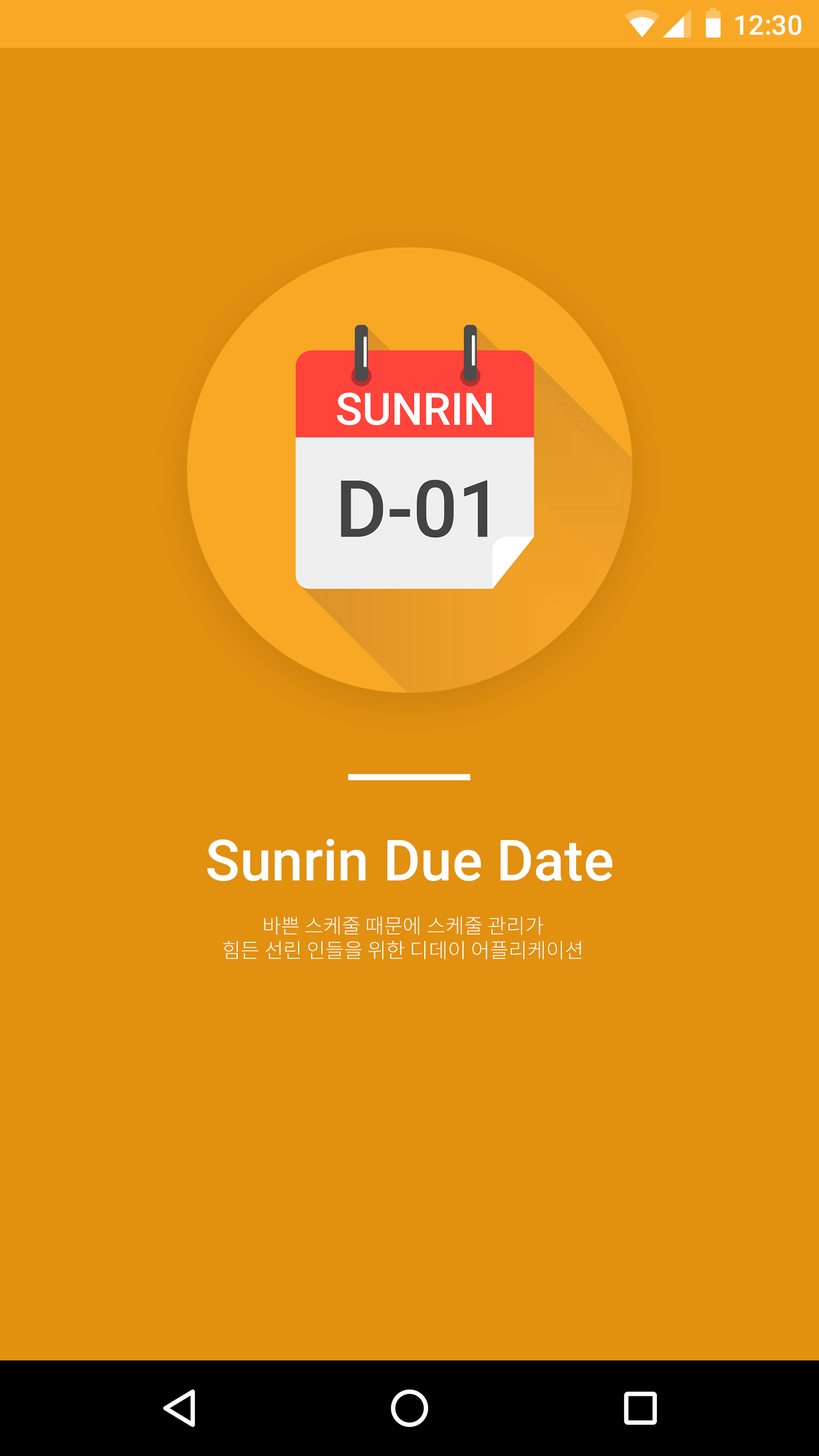
<style>
.page{position:relative;width:819px;height:1456px;background:#e19010}
.page>*{position:absolute;margin:0}
.t1{font:27.3px "Roboto-Medium";color:#ffffff}
.t2{font:56.8px "Roboto-Medium";color:#ffffff}
.t3{font:20.5px "NotoSansCJKkr-Light";color:#ffffff}
</style>
<div class="page">
<p class="t1" style="left:735px;top:15px;width:66px;height:20px">12:30</p>
<p class="t2" style="left:207px;top:839px;width:406px;height:42px">Sunrin Due Date</p>
<p class="t3" style="left:223px;top:916px;width:358px;height:43px;text-align:center">바쁜 스케줄 때문에 스케줄 관리가<br>힘든 선린 인들을 위한 디데이 어플리케이션</p>
</div>
